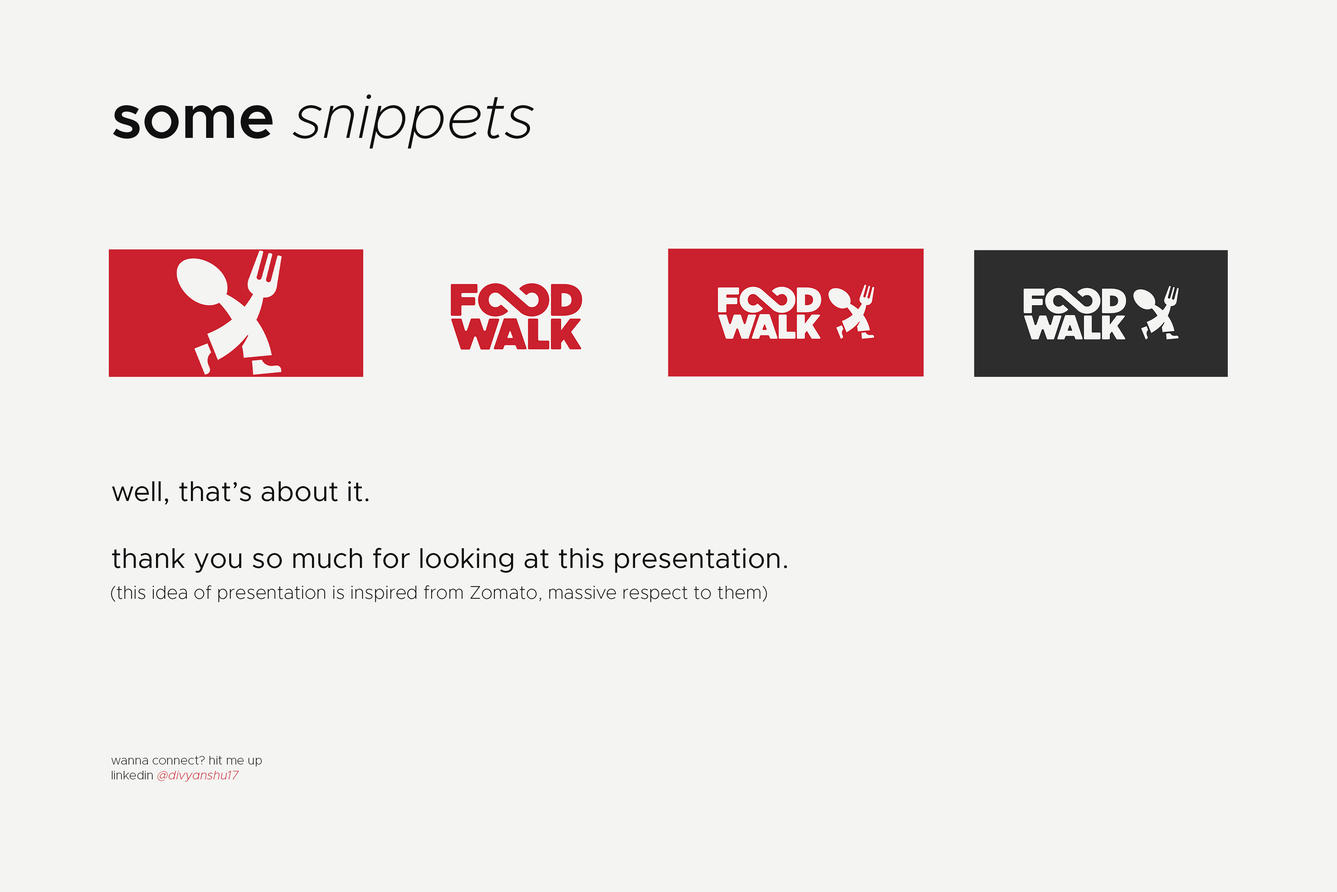
<style>
.page{position:relative;width:1337px;height:892px;background:#f4f4f2}
.page>*{position:absolute;margin:0}
.t1{font:61.9px "Metropolis-ExtraLightItalic";color:#101010}
.t2{font:61.9px "Metropolis-SemiBold";color:#101010}
.t3{font:27.9px "Metropolis-Regular";color:#0f0f0f}
.t4{font:18.6px "Metropolis-ExtraLight";color:#0f0f0f}
.t5{font:12.4px "Metropolis-ExtraLight";color:#0f0f0f}
.t6{font:12.4px "Metropolis-ExtraLight";color:#101010}
.t7{font:12.4px "Metropolis-ExtraLightItalic";color:#cb202d}
</style>
<div class="page">
<p class="t1" style="left:113px;top:94px;width:421px;height:55px"><span class="t2">some </span>snippets</p>
<p class="t3" style="left:112px;top:481px;width:675px;height:91px">well, that’s about it.<br><br>thank you so much for looking at this presentation.</p>
<p class="t4" style="left:111px;top:585px;width:656px;height:17px">(this idea of presentation is inspired from Zomato, massive respect to them)</p>
<p class="t5" style="left:111px;top:756px;width:151px;height:25px">wanna connect? hit me up <br><span class="t6">linkedin </span><span class="t7">@divyanshu17</span></p>
</div>
